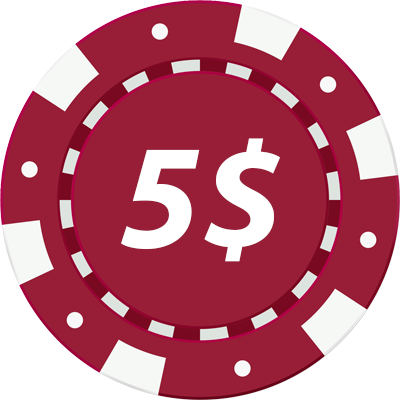
<style>
.page{position:relative;width:400px;height:400px;background:#981e37}
.page>*{position:absolute;margin:0}
.t1{font:150px "MyriadPro-BoldIt";letter-spacing:0.01em;color:#ffffff}
</style>
<div class="page">
<p class="t1" style="left:121px;top:138px;width:159px;height:124px">5$</p>
</div>
